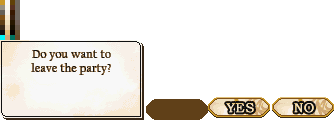
<style>
.page{position:relative;width:336px;height:120px;background:#ffffff}
.page>*{position:absolute;margin:0}
.t1{font:12px/14px "CalifornianFB-Reg";letter-spacing:0.025em;color:#101010}
</style>
<div class="page">
<p class="t1" style="left:31px;top:50px;width:80px;height:25px;text-align:center">Do you want to<br>leave the party?</p>
</div>
